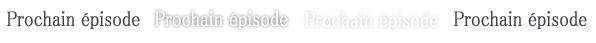
<style>
.page{position:relative;width:596px;height:43px;background:#ffffff}
.page>*{position:absolute;margin:0}
.t1{font:21.5px "MS-PMincho";color:#394145;font-weight:bold;scale:0.84 1}
</style>
<div class="page">
<p class="t1" style="left:7px;top:10px;width:133px;height:19px">Prochain épisode</p>
<p class="t1" style="left:454px;top:10px;width:133px;height:19px">Prochain épisode</p>
</div>
